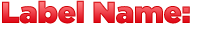
<style>
.page{position:relative;width:200px;height:30px;background:#ffffff}
.page>*{position:absolute;margin:0}
.t1{font:30px "Gotham-Ultra"}
</style>
<div class="page">
<p class="t1" style="left:2px;top:0px;width:188px;height:24px">Label Name:</p>
</div>
